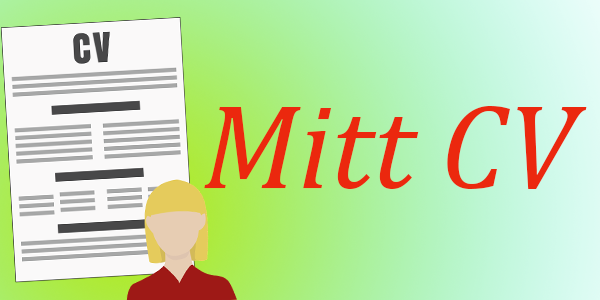
<style>
.page{position:relative;width:600px;height:300px}
.page>*{position:absolute;margin:0}
.t1{font:120.8px "Cambria-Italic";color:#eb280e}
</style>
<div class="page">
<p class="t1" style="left:204px;top:106px;width:383px;height:83px">Mitt CV</p>
</div>
